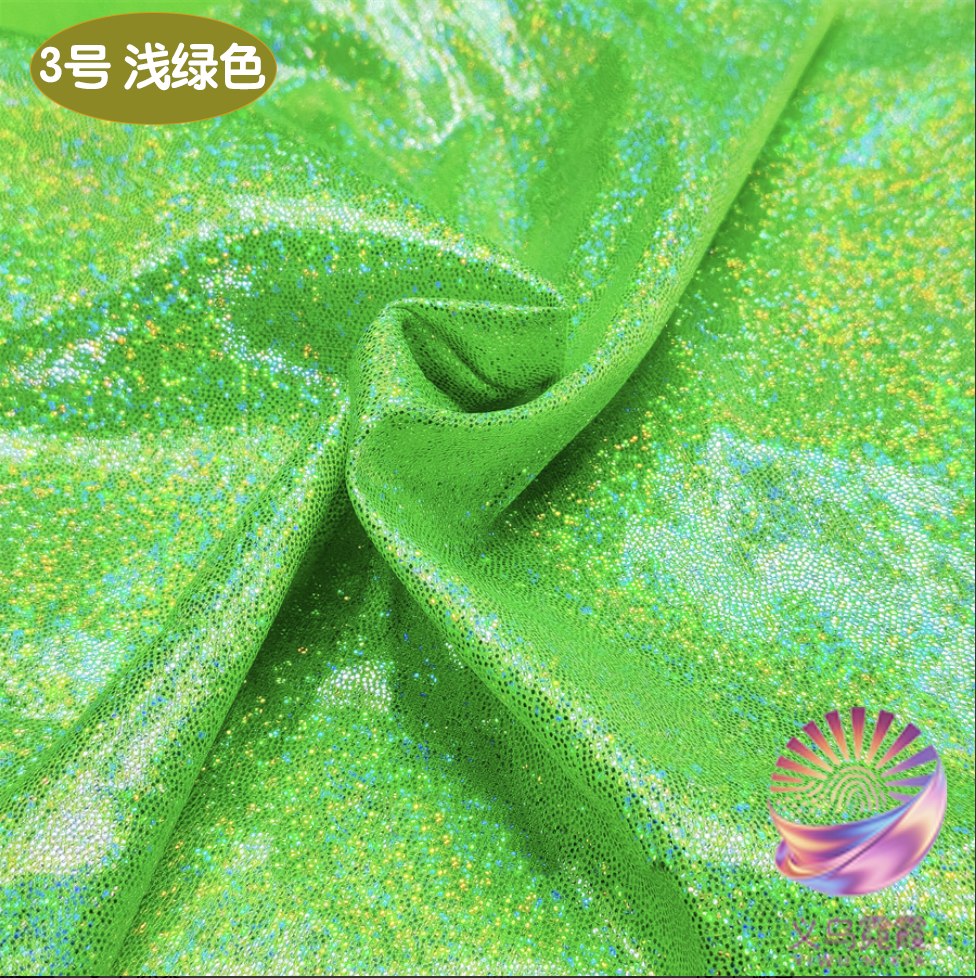
<style>
.page{position:relative;width:976px;height:978px}
.page>*{position:absolute;margin:0}
.t1{font:49.1px "STYuanti-SC-Bold";color:#ffffff;scale:0.97 1}
.t2{font:84.6px "STBaoliSC-Regular";color:#ffffff;scale:0.97 1}
</style>
<div class="page">
<p class="t1" style="left:40px;top:42px;width:226px;height:49px"><span class="t2">         </span>3号 浅绿色</p>
</div>
